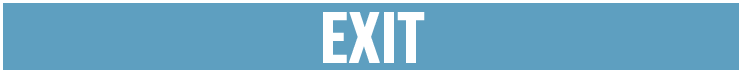
<style>
.page{position:relative;width:742px;height:73px;background:#5e9fc0}
.page>*{position:absolute;margin:0}
.t1{font:72px "BebasNeue";color:#ffffff;font-weight:bold}
</style>
<div class="page">
<p class="t1" style="left:323px;top:12px;width:102px;height:51px">Exit</p>
</div>
